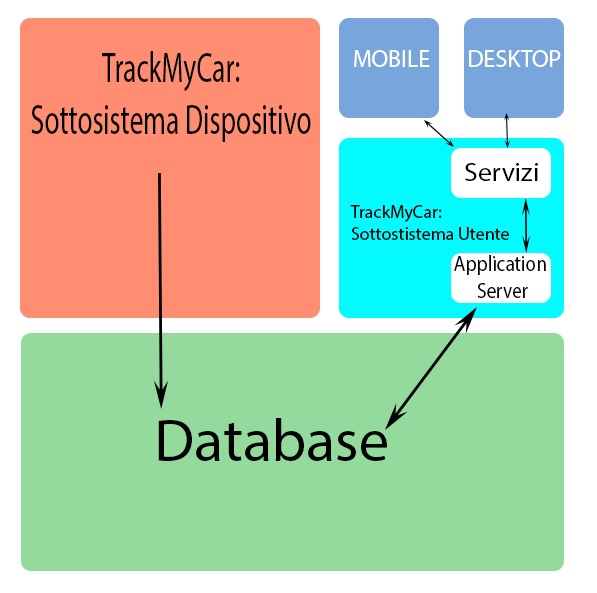
<style>
.page{position:relative;width:597px;height:593px;background:#93da9c}
.page>*{position:absolute;margin:0}
.t1{font:42.7px "MyriadPro-Regular";color:#010101;scale:0.64 1}
.t2{font:24px "MyriadPro-Regular";color:#fefefe}
.t3{font:24px "MyriadPro-Regular";color:#ffffff}
.t4{font:25.6px "MyriadPro-Regular";color:#000000;scale:1.08 1}
.t5{font:18px "MyriadPro-Regular";color:#010101}
.t6{font:21.9px "MyriadPro-Regular";color:#000000;scale:0.88 1}
.t7{font:60px "MyriadPro-Regular";color:#000000}
</style>
<div class="page">
<p class="t1" style="left:31px;top:51px;width:280px;height:91px;text-align:center">TrackMyCar:<br>Sottosistema Dispositivo</p>
<p class="t2" style="left:354px;top:50px;width:76px;height:17px">MOBILE</p>
<p class="t3" style="left:469px;top:50px;width:92px;height:17px">DESKTOP</p>
<p class="t4" style="left:465px;top:163px;width:73px;height:18px">Servizi</p>
<p class="t5" style="left:350px;top:205px;width:159px;height:35px">TrackMyCar:<br>Sottostistema Utente</p>
<p class="t6" style="left:454px;top:255px;width:92px;height:43px;text-align:center">Application <br>Server</p>
<p class="t7" style="left:158px;top:418px;width:229px;height:43px">Database</p>
</div>
